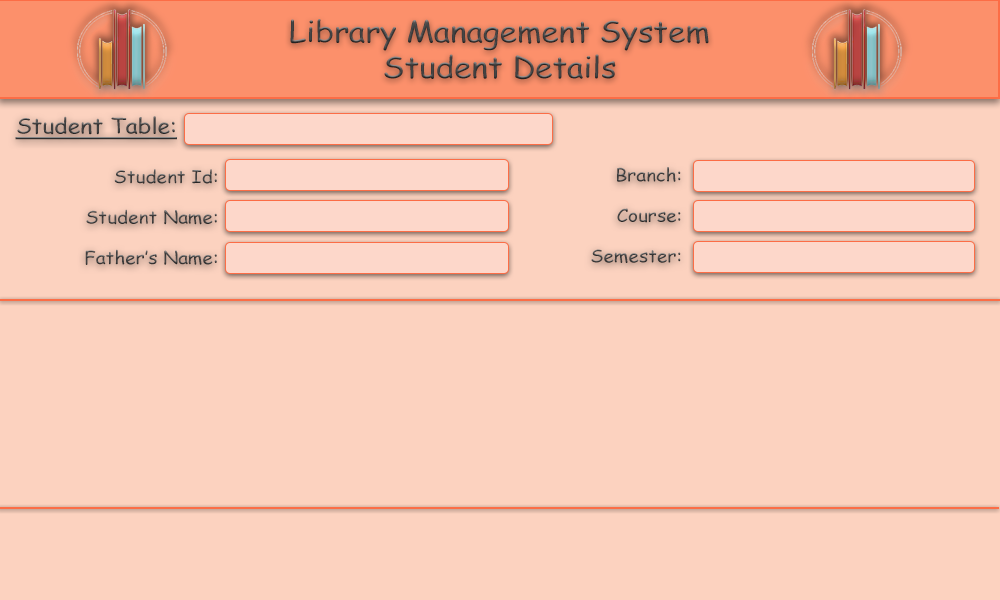
<style>
.page{position:relative;width:1000px;height:600px;background:#fcd2bf}
.page>*{position:absolute;margin:0}
.t1{font:29.8px "ComicSansMS";color:#444343;scale:1.06 1}
.t2{font:21.4px "ComicSansMS";color:#444343;text-decoration:underline;scale:1.07 1}
.t3{font:17.9px/40.5px "ComicSansMS";color:#444343;scale:1.06 1}
</style>
<div class="page">
<p class="t1" style="left:290px;top:19px;width:419px;height:61px;text-align:center">Library Management System<br>Student Details</p>
<p class="t2" style="left:15px;top:116px;width:162px;height:24px">Student Table:</p>
<p class="t3" style="left:85px;top:169px;width:132px;height:96px;text-align:right">Student Id:<br>Student Name:<br>Father’s Name:</p>
<p class="t3" style="left:591px;top:167px;width:90px;height:96px;text-align:right">Branch:<br>Course:<br>Semester:</p>
</div>
